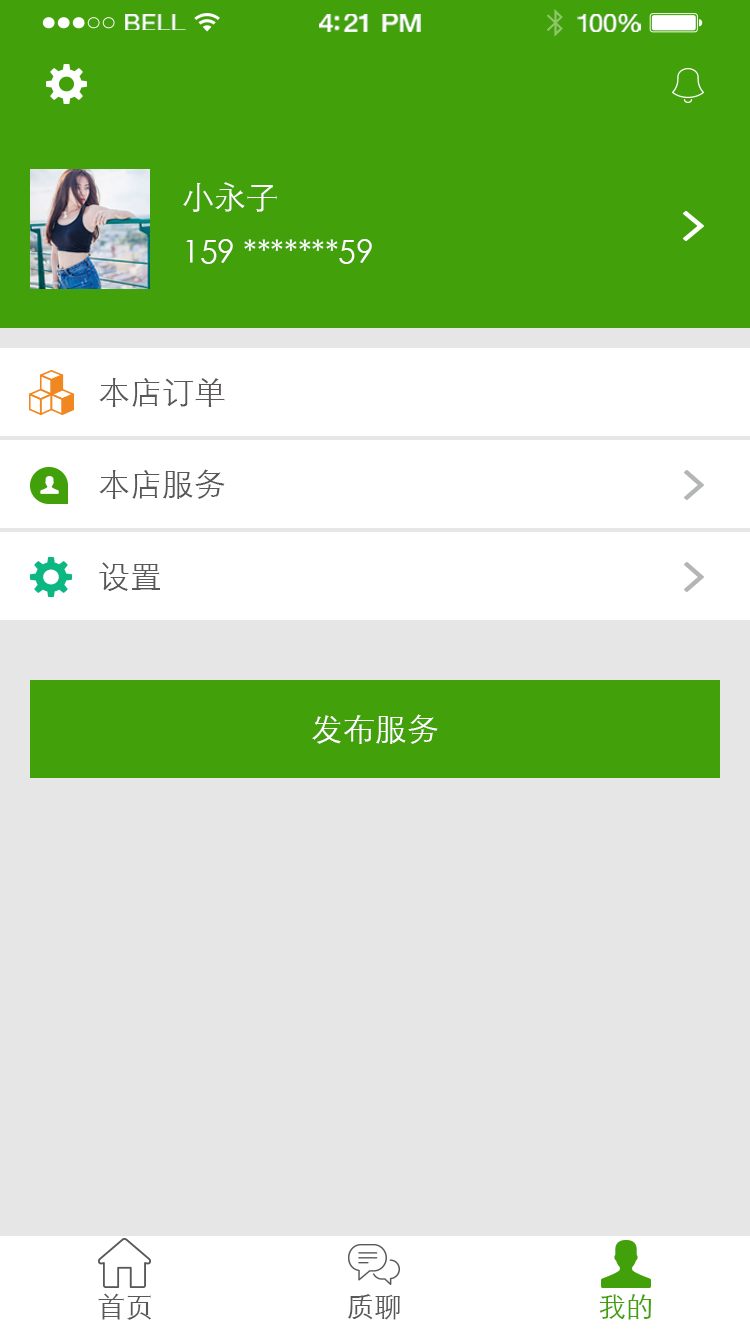
<style>
.page{position:relative;width:750px;height:1334px;background:#e6e6e6}
.page>*{position:absolute;margin:0}
.t1{font:23.3px "HelveticaNeue";letter-spacing:0.02em;color:#ffffff;scale:1.06 1}
.t2{font:25.3px "HelveticaNeue-Medium";letter-spacing:-0.02em;color:#ffffff;scale:1.06 1}
.t3{font:24.3px "HelveticaNeue";letter-spacing:-0.02em;color:#ffffff;scale:1.06 1}
.t4{font:32px/56px "STXihei";color:#ffffff}
.t5{font:32px "STXihei";color:#595757}
.t6{font:32px "STXihei";color:#ffffff}
.t7{font:28px "STXihei";color:#595757}
.t8{font:28px "STXihei";color:#42a00a}
</style>
<div class="page">
<p class="t1" style="left:125px;top:14px;width:61px;height:16px">BELL</p>
<p class="t2" style="left:319px;top:14px;width:102px;height:18px">4:21 PM</p>
<p class="t3" style="left:577px;top:14px;width:64px;height:18px">100%</p>
<p class="t4" style="left:183px;top:182px;width:189px;height:82px">小永子<br>159 *******59</p>
<p class="t5" style="left:99px;top:378px;width:126px;height:29px">本店订单</p>
<p class="t5" style="left:99px;top:469px;width:126px;height:30px">本店服务</p>
<p class="t5" style="left:99px;top:562px;width:61px;height:29px">设置</p>
<p class="t6" style="left:312px;top:714px;width:126px;height:30px">发布服务</p>
<p class="t7" style="left:98px;top:1293px;width:53px;height:27px">首页</p>
<p class="t7" style="left:348px;top:1294px;width:52px;height:26px">质聊</p>
<p class="t8" style="left:599px;top:1294px;width:53px;height:26px">我的</p>
</div>
